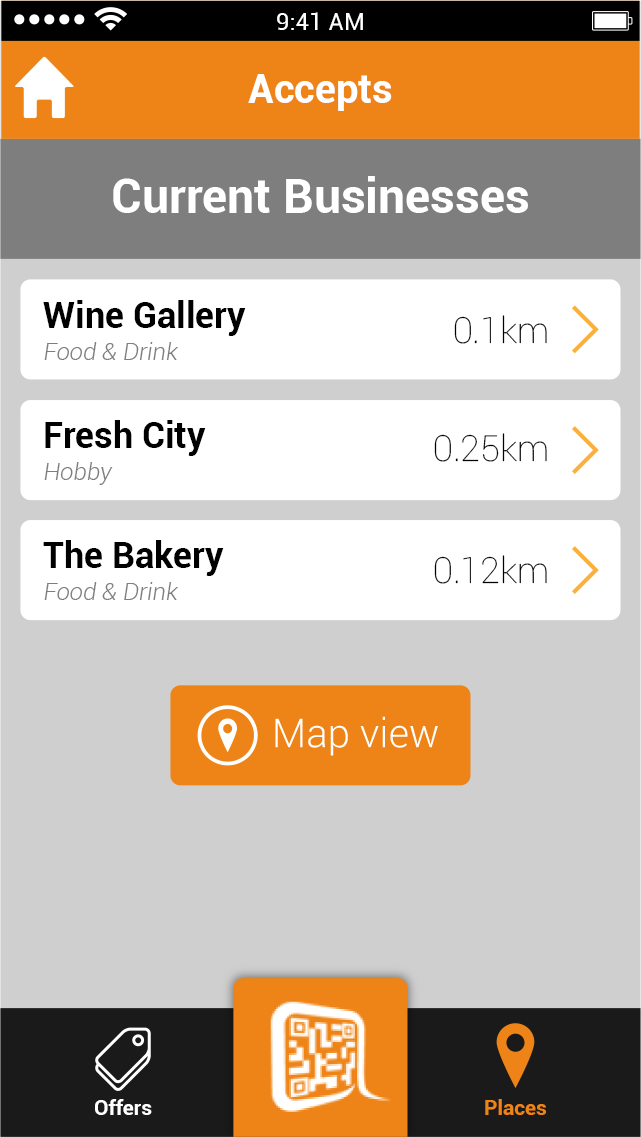
<style>
.page{position:relative;width:641px;height:1137px;background:#cfcfcf}
.page>*{position:absolute;margin:0}
.t1{font:24px "Roboto-Regular";color:#ffffff}
.t2{font:40px "Roboto-Bold";color:#ffffff}
.t3{font:48px "Roboto-Bold";color:#ffffff}
.t4{font:36px "Roboto-Bold";color:#000000}
.t5{font:36px "Roboto-Thin";color:#000000}
.t6{font:24px "Roboto-LightItalic";color:#7e7e7e}
.t7{font:21px "Roboto-Bold";color:#ffffff}
.t8{font:21px "Roboto-Bold";color:#ee8417}
</style>
<div class="page">
<p class="t1" style="left:277px;top:12px;width:86px;height:18px">9:41 AM</p>
<p class="t2" style="left:248px;top:74px;width:144px;height:37px">Accepts</p>
<p class="t3" style="left:113px;top:176px;width:415px;height:37px">Current Businesses</p>
<p class="t4" style="left:43px;top:300px;width:203px;height:36px">Wine Gallery</p>
<p class="t5" style="left:454px;top:315px;width:93px;height:29px">0.1km</p>
<p class="t6" style="left:44px;top:342px;width:134px;height:18px">Food &amp; Drink</p>
<p class="t4" style="left:45px;top:420px;width:161px;height:36px">Fresh City</p>
<p class="t5" style="left:434px;top:433px;width:113px;height:29px">0.25km</p>
<p class="t6" style="left:44px;top:462px;width:69px;height:23px">Hobby</p>
<p class="t4" style="left:43px;top:540px;width:181px;height:36px">The Bakery</p>
<p class="t5" style="left:434px;top:555px;width:113px;height:29px">0.12km</p>
<p class="t6" style="left:44px;top:582px;width:134px;height:18px">Food &amp; Drink</p>
<p class="t7" style="left:95px;top:1099px;width:57px;height:16px">Offers</p>
<p class="t8" style="left:485px;top:1099px;width:61px;height:16px">Places</p>
</div>
